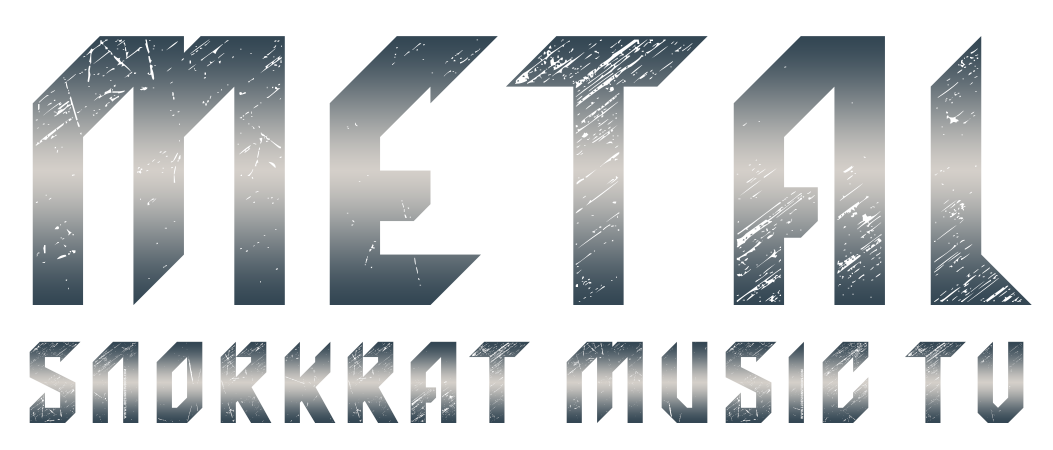
<style>
.page{position:relative;width:1053px;height:450px;background:#ffffff}
.page>*{position:absolute;margin:0}
.t1{font:116px "BlackNemesisPerosonalUSE-DEMO-Grunge";letter-spacing:0.06em}
</style>
<div class="page">
<p class="t1" style="left:29px;top:341px;width:995px;height:82px">SNORKRAT MUSIC TV</p>
</div>
